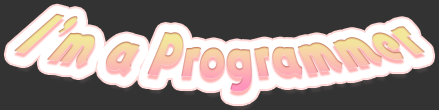
<style>
.page{position:relative;width:439px;height:110px;background:#333333}
.page>*{position:absolute;margin:0}
.t1{font:44.9px "YurukaStd-UB"}
</style>
<div class="page">
<p class="t1" style="left:14px;top:13px;width:411px;height:79px;rotate:-1deg">I’m a Programmer</p>
</div>
